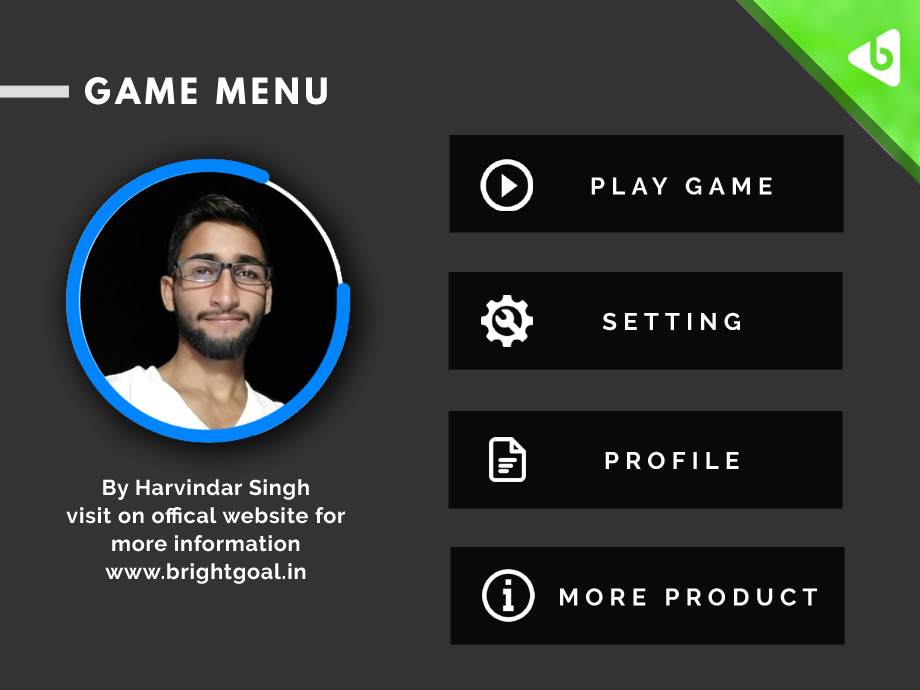
<style>
.page{position:relative;width:920px;height:690px;background:#333333}
.page>*{position:absolute;margin:0}
.t1{font:32px "LeagueSpartan-Bold";letter-spacing:0.14em;color:#ffffff}
.t2{font:24px "Raleway-Bold";letter-spacing:0.26em;color:#ffffff}
.t3{font:21.3px/28px "Raleway-Bold";letter-spacing:0.04em;color:#ffffff}
</style>
<div class="page">
<p class="t1" style="left:85px;top:77px;width:242px;height:28px">GAME MENU</p>
<p class="t2" style="left:591px;top:177px;width:181px;height:18px">PLAY GAME</p>
<p class="t2" style="left:602px;top:312px;width:138px;height:19px">SETTING</p>
<p class="t2" style="left:605px;top:451px;width:134px;height:18px">PROFILE</p>
<p class="t3" style="left:66px;top:479px;width:279px;height:105px;text-align:center">By Harvindar Singh<br>visit on offical website for<br>more information<br>www.brightgoal.in</p>
<p class="t2" style="left:560px;top:588px;width:257px;height:18px">MORE PRODUCT</p>
</div>
